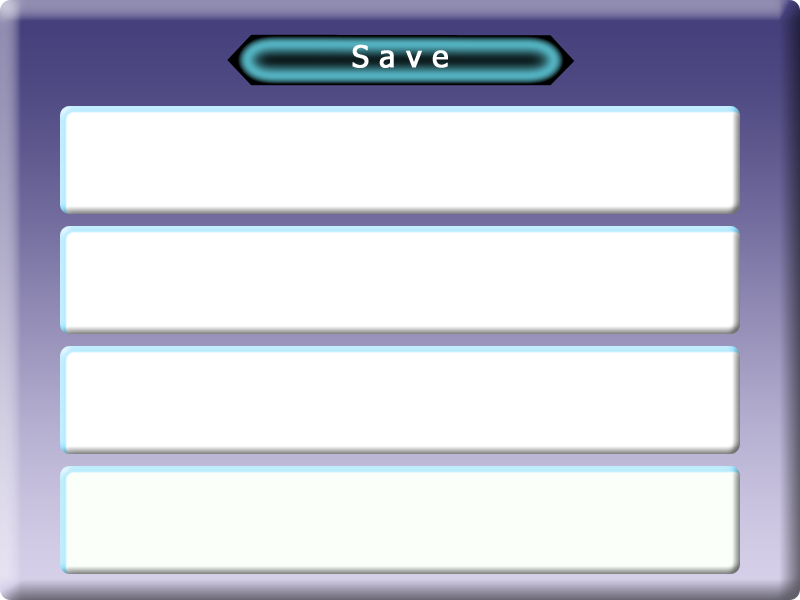
<style>
.page{position:relative;width:800px;height:600px;background:#ffffff}
.page>*{position:absolute;margin:0}
.t1{font:30px "Tahoma";color:#ffffff;font-weight:bold}
</style>
<div class="page">
<p class="t1" style="left:352px;top:44px;width:96px;height:24px">S a v e</p>
</div>
